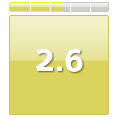
<style>
.page{position:relative;width:117px;height:117px;background:#dad35d}
.page>*{position:absolute;margin:0}
.t1{font:36px "Colaborate-Bold";color:#ffffff;text-transform:uppercase}
</style>
<div class="page">
<p class="t1" style="left:35px;top:49px;width:48px;height:23px">2.6</p>
</div>
